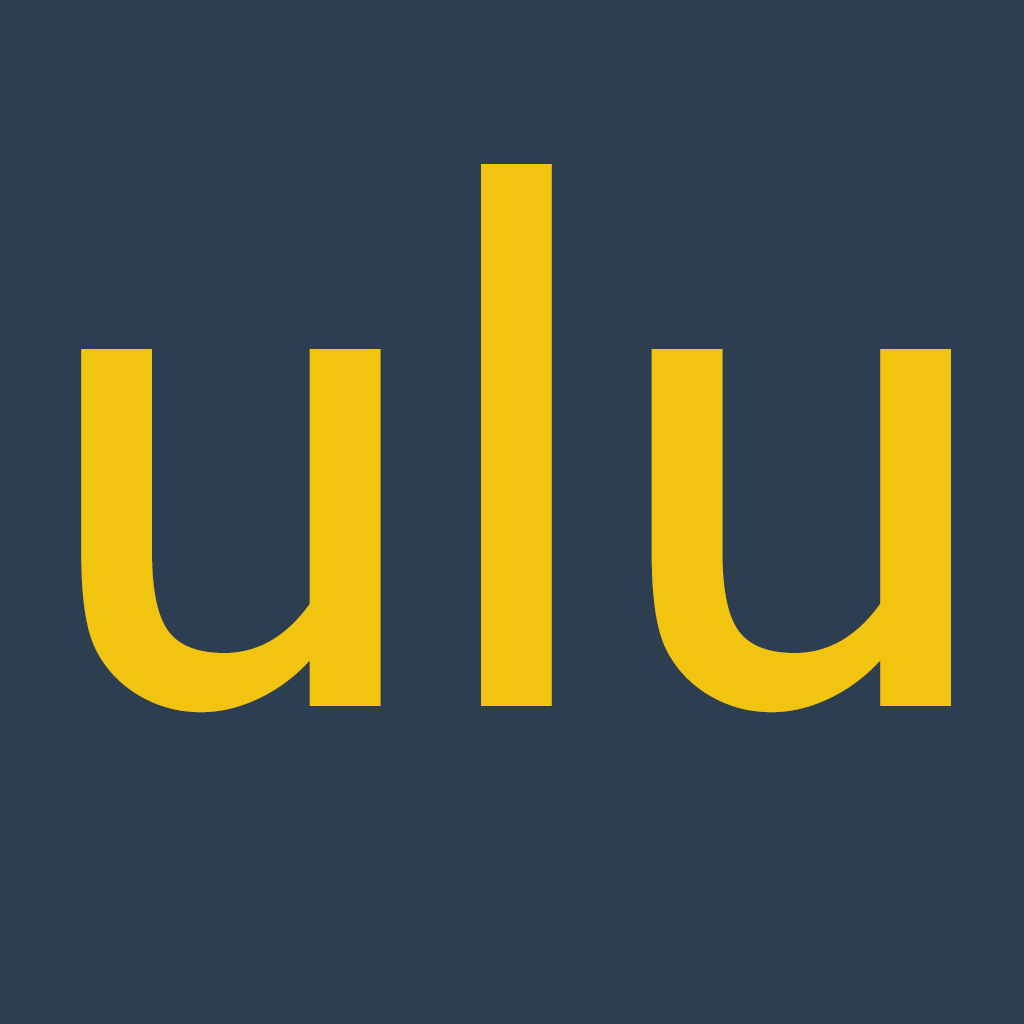
<style>
.page{position:relative;width:1024px;height:1024px;background:#2c3e50}
.page>*{position:absolute;margin:0}
.t1{font:794.1px "GillSansMT";color:#f1c40f}
</style>
<div class="page">
<p class="t1" style="left:81px;top:164px;width:870px;height:549px">ulu</p>
</div>
